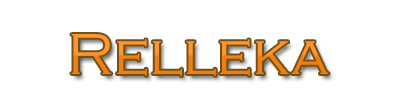
<style>
.page{position:relative;width:400px;height:110px;background:#ffffff}
.page>*{position:absolute;margin:0}
.t1{font:60px "CopperplateGothic-Light"}
</style>
<div class="page">
<p class="t1" style="left:71px;top:34px;width:258px;height:42px">Relleka</p>
</div>
